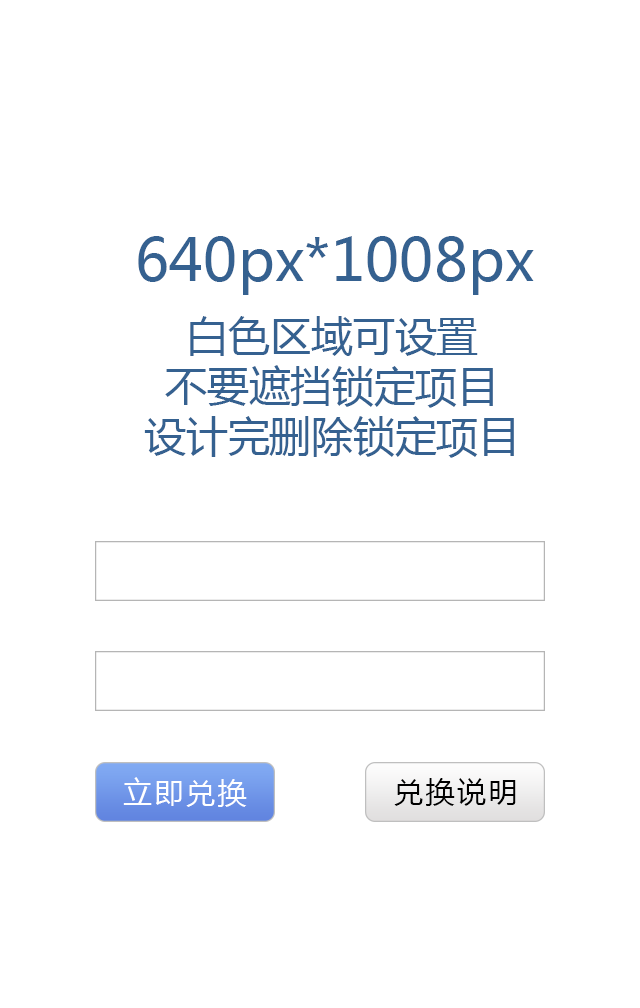
<style>
.page{position:relative;width:640px;height:1008px;background:#ffffff}
.page>*{position:absolute;margin:0}
.t1{font:58.3px "MicrosoftYaHei";color:#356190}
.t2{font:41.7px/50px "MicrosoftYaHei";color:#356190}
.t3{font:29.2px "MicrosoftYaHei";letter-spacing:0.08em;color:#ffffff}
.t4{font:29.2px "MicrosoftYaHei";letter-spacing:0.08em;color:#000000}
</style>
<div class="page">
<p class="t1" style="left:138px;top:236px;width:396px;height:59px">640px*1008px</p>
<p class="t2" style="left:144px;top:316px;width:370px;height:142px;text-align:center">白色区域可设置<br>不要遮挡锁定项目<br>设计完删除锁定项目</p>
<p class="t3" style="left:123px;top:777px;width:124px;height:30px">立即兑换</p>
<p class="t4" style="left:394px;top:778px;width:122px;height:28px">兑换说明</p>
</div>
